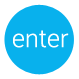
<style>
.page{position:relative;width:79px;height:79px;background:#08b1ed}
.page>*{position:absolute;margin:0}
.t1{font:25px "Roboto-Light";color:#ffffff}
</style>
<div class="page">
<p class="t1" style="left:13px;top:30px;width:56px;height:18px">enter</p>
</div>
